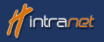
<style>
.page{position:relative;width:104px;height:42px;background:#1f3662}
.page>*{position:absolute;margin:0}
.t1{font:14.7px "Birdman";color:#dfdfdf}
.t2{font:14.7px "BirdmanOblique";color:#df7512}
</style>
<div class="page">
<p class="t1" style="left:30px;top:15px;width:65px;height:12px">intra<span class="t2">net</span></p>
</div>
